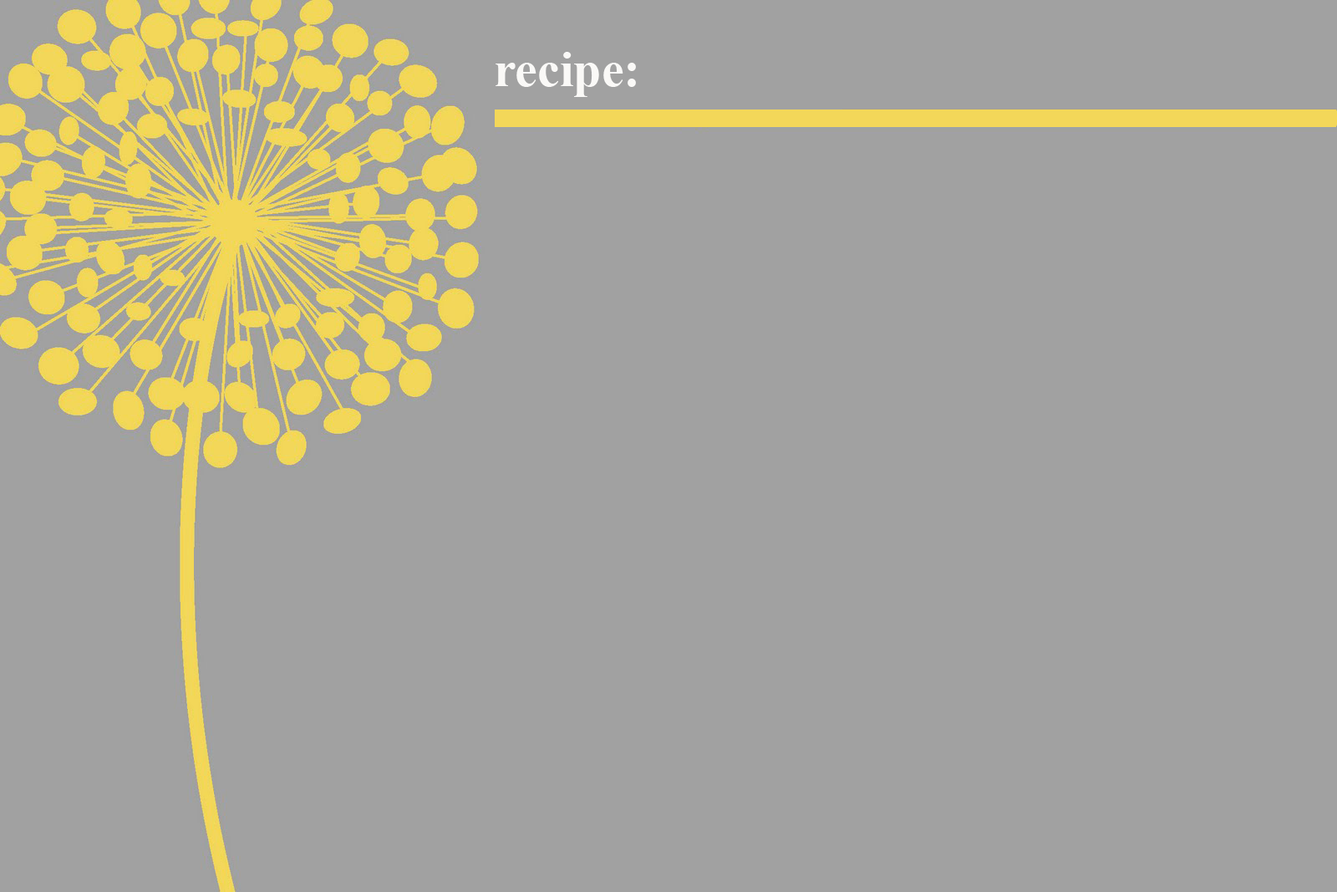
<style>
.page{position:relative;width:1337px;height:892px;background:#a1a1a1}
.page>*{position:absolute;margin:0}
.t1{font:50.1px "TimesNewRomanPS-BoldMT";color:#faf9f7}
</style>
<div class="page">
<p class="t1" style="left:496px;top:52px;width:140px;height:45px">recipe:</p>
</div>
